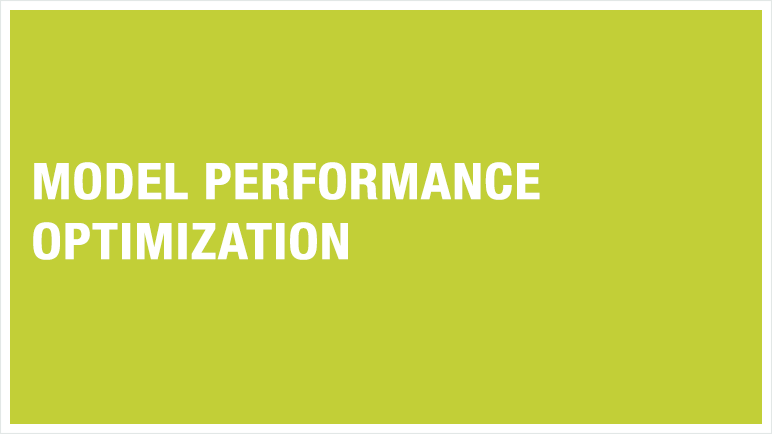
<style>
.page{position:relative;width:772px;height:434px;background:#c2cf37}
.page>*{position:absolute;margin:0}
.t1{font:50px "HelveticaNeue-CondensedBold";color:#ffffff;font-weight:bold;scale:1.07 1}
</style>
<div class="page">
<p class="t1" style="left:33px;top:162px;width:507px;height:98px">MODEL PERFORMANCE<br>OPTIMIZATION</p>
</div>
